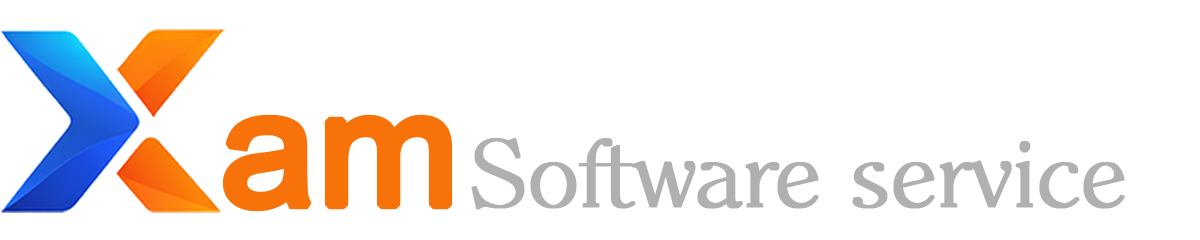
<style>
.page{position:relative;width:1200px;height:240px;background:#ffffff}
.page>*{position:absolute;margin:0}
.t1{font:160.4px "ArialMT";letter-spacing:-0.01em;color:#f8720a;font-weight:bold;scale:1.06 1}
.t2{font:92px "Clerface-Light";letter-spacing:-0.01em;color:#b0b0b0;font-weight:bold;scale:1.06 1}
</style>
<div class="page">
<p class="t1" style="left:222px;top:114px;width:231px;height:98px">am</p>
<p class="t2" style="left:471px;top:138px;width:654px;height:72px">Software service</p>
</div>
